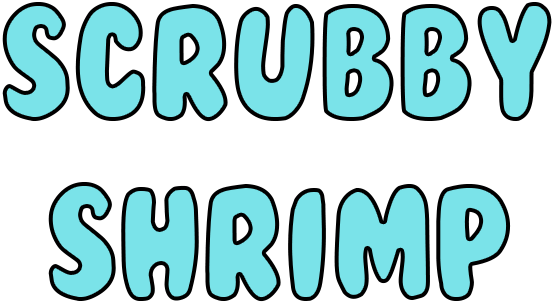
<style>
.page{position:relative;width:554px;height:304px;background:#ffffff}
.page>*{position:absolute;margin:0}
.t1{font:150px "BubbleGum";letter-spacing:-0.01em;color:#7ae3e9;scale:0.9 1}
</style>
<div class="page">
<p class="t1" style="left:2px;top:2px;width:550px;height:300px;text-align:center">Scrubby<br>Shrimp</p>
</div>
